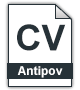
<style>
.page{position:relative;width:80px;height:90px;background:#ffffff}
.page>*{position:absolute;margin:0}
.t1{font:36px "Arial-BoldMT";color:#273238}
.t2{font:12px "Arial-BoldMT";color:#ffffff}
</style>
<div class="page">
<p class="t1" style="left:17px;top:24px;width:49px;height:27px">CV</p>
<p class="t2" style="left:17px;top:66px;width:46px;height:12px">Antipov</p>
</div>
